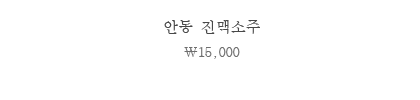
<style>
.page{position:relative;width:420px;height:100px;background:#ffffff}
.page>*{position:absolute;margin:0}
.t1{font:15px "BatangChe";color:#484848}
.t2{font:14px "BatangChe";color:#6e6e6e}
</style>
<div class="page">
<p class="t1" style="left:164px;top:20px;width:96px;height:14px">안동 진맥소주</p>
<p class="t2" style="left:184px;top:47px;width:56px;height:12px">￦15,000</p>
</div>
